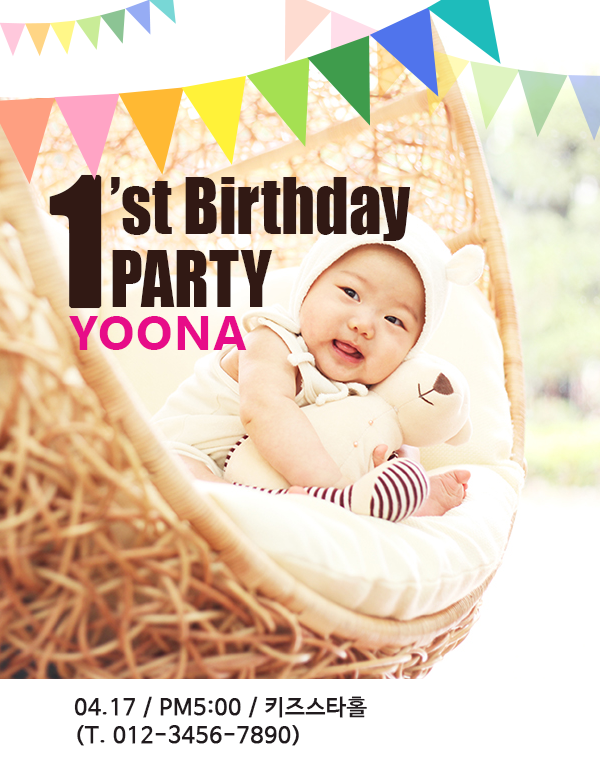
<style>
.page{position:relative;width:600px;height:770px;background:#ffffff}
.page>*{position:absolute;margin:0}
.t1{font:163.3px "Impact";color:#311914;font-weight:bold;scale:0.87 1}
.t2{font:71.5px/73px "Impact";color:#311914;scale:0.91 1}
.t3{font:48px "KhmerUI-Bold";letter-spacing:0.03em;color:#e70c88}
.t4{font:22px/28px "NanumBarunGothic";letter-spacing:0.015em;color:#201a1d;font-weight:bold}
</style>
<div class="page">
<p class="t1" style="left:49px;top:174px;width:53px;height:135px">1</p>
<p class="t2" style="left:111px;top:177px;width:300px;height:130px">’st Birthday<br>PARTY</p>
<p class="t3" style="left:69px;top:316px;width:178px;height:34px">YOONA</p>
<p class="t4" style="left:74px;top:696px;width:293px;height:50px">04.17 / PM5:00 / 키즈스타홀<br>(T. 012-3456-7890)</p>
</div>
